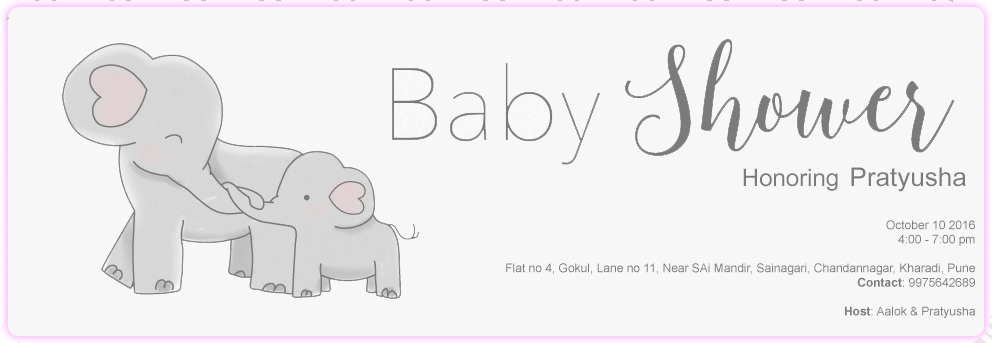
<style>
.page{position:relative;width:992px;height:343px;background:#f7f7f7}
.page>*{position:absolute;margin:0}
.t1{font:12px "ArialMT";color:#7b7b7b}
.t2{font:22px "ArialMT";color:#ffffff}
.t3{font:24px "DokChampa";color:#7b7b7b}
.t4{font:26px "DokChampa";color:#7b7b7b}
.t5{font:24px "DokChampa";color:#f7f7f7}
.t6{font:12px "ArialMT";color:#f7f7f7}
.t7{font:12px "Arial-BoldMT";color:#7b7b7b}
</style>
<div class="page">
<p class="t1" style="left:506px;top:167px;width:478px;height:151px;text-align:center"><span class="t2"><br><br><br><br><br><br></span><span class="t3">Honoring </span><span class="t4">Pratyusha</span><span class="t5">w <br><br><br></span>October 10 2016<span class="t6">w<br></span>4:00 - 7:00 pm<span class="t6">w<br></span><br>Flat no 4, Gokul, Lane no 11, Near SAi Mandir, Sainagari, Chandannagar, Kharadi, Pune<span class="t6">w<br></span><span class="t7">Contact</span>: 9975642689<span class="t6">w<br>Host: P<br></span><span class="t7">Host</span>: Aalok &amp; Pratyusha<span class="t6">w</span></p>
</div>
